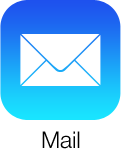
<style>
.page{position:relative;width:121px;height:149px;background:#ffffff}
.page>*{position:absolute;margin:0}
.t1{font:23px "HelveticaNeue-Light";color:#000000}
</style>
<div class="page">
<p class="t1" style="left:42px;top:131px;width:38px;height:18px">Mail</p>
</div>
